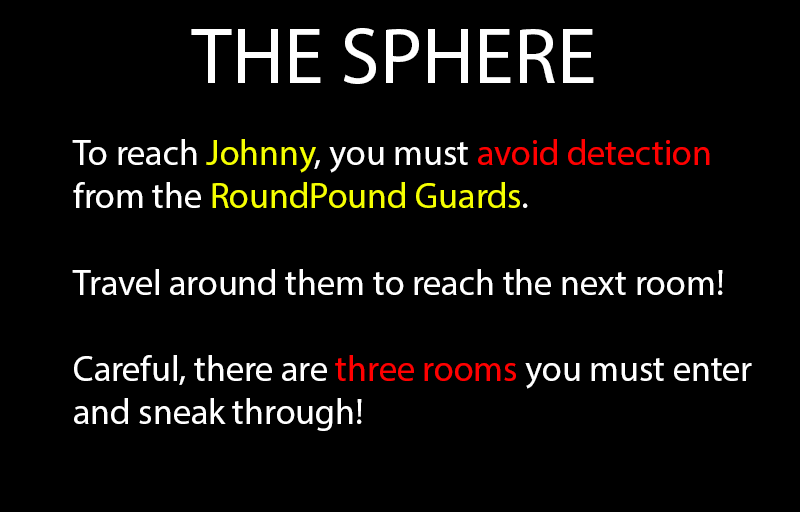
<style>
.page{position:relative;width:800px;height:512px;background:#000000}
.page>*{position:absolute;margin:0}
.t1{font:80px "MyriadPro-Regular";color:#ffffff}
.t2{font:36px "MyriadPro-Regular";color:#ffffff}
.t3{font:36px "MyriadPro-Regular";color:#f6ff00}
.t4{font:36px "MyriadPro-Regular";color:#ff0000}
</style>
<div class="page">
<p class="t1" style="left:191px;top:28px;width:403px;height:56px">THE SPHERE</p>
<p class="t2" style="left:72px;top:139px;width:680px;height:292px">To reach <span class="t3">Johnny</span>, you must <span class="t4">avoid detection</span> <br>from the <span class="t3">RoundPound Guards</span>. <br><br>Travel around them to reach the next room! <br><br>Careful, there are <span class="t4">three rooms</span> you must enter <br>and sneak through!</p>
</div>
